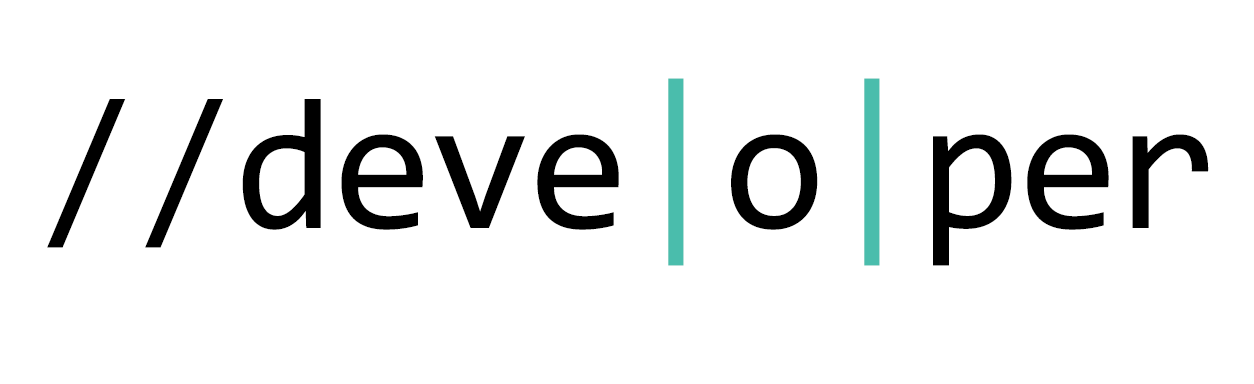
<style>
.page{position:relative;width:1254px;height:384px;background:#ffffff}
.page>*{position:absolute;margin:0}
.t1{font:186.7px "Consolas";letter-spacing:-0.025em;color:#000000}
.t2{font:186.7px "Consolas";letter-spacing:-0.025em;color:#4abdac}
</style>
<div class="page">
<p class="t1" style="left:47px;top:78px;width:1162px;height:188px">//deve<span class="t2">|</span>o<span class="t2">|</span>per</p>
</div>
